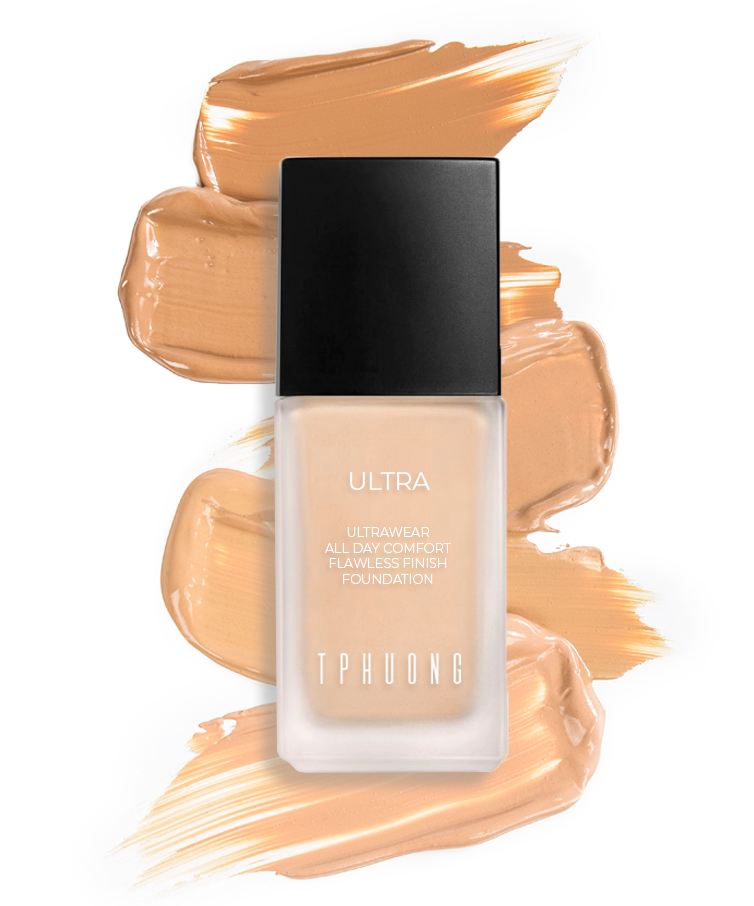
<style>
.page{position:relative;width:754px;height:906px;background:#ffffff}
.page>*{position:absolute;margin:0}
.t1{font:25px "Montserrat-Regular";color:#ffffff}
.t2{font:13px "Montserrat-Light";color:#ffffff}
</style>
<div class="page">
<p class="t1" style="left:350px;top:472px;width:80px;height:18px">ULTRA</p>
<p class="t2" style="left:325px;top:527px;width:126px;height:57px;text-align:center">ULTRAWEAR<br>ALL DAY COMFORT<br>FLAWLESS FINISH <br>FOUNDATION</p>
</div>
